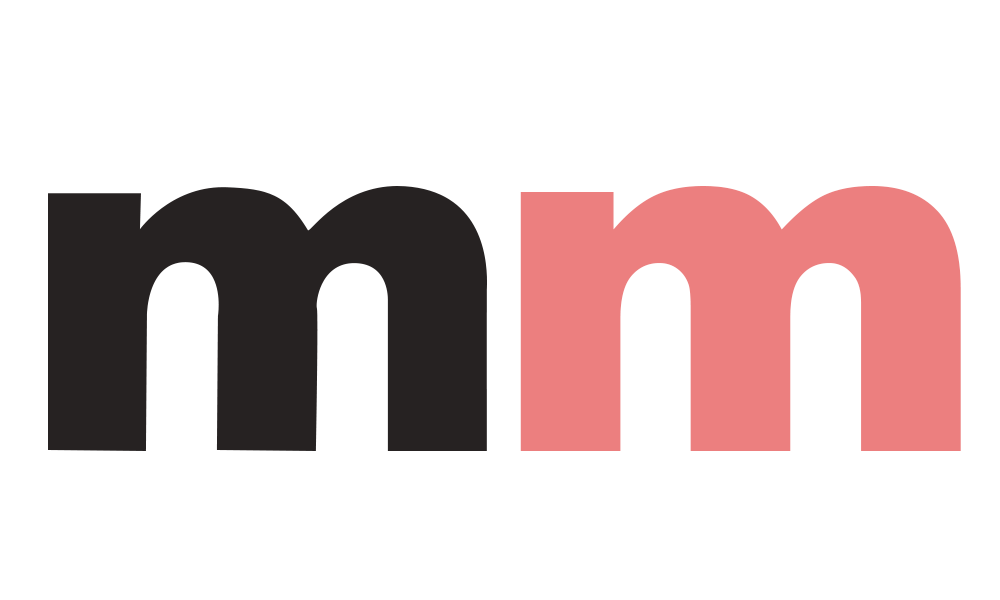
<style>
.page{position:relative;width:1000px;height:600px;background:#ffffff}
.page>*{position:absolute;margin:0}
.t1{font:500px "Arial-Black";color:#ec7f7f}
</style>
<div class="page">
<p class="t1" style="left:520px;top:186px;width:441px;height:265px">m</p>
</div>
